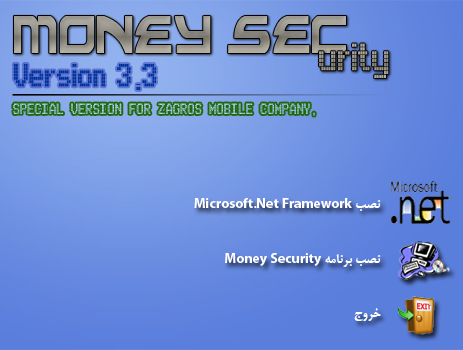
<style>
.page{position:relative;width:463px;height:350px}
.page>*{position:absolute;margin:0}
.t1{font:98.5px "Alexis";color:#9c9890;scale:0.61 1}
.t2{font:59.1px "Arcade";color:#96958d;scale:0.61 1}
.t3{font:49.3px "Arcade";color:#003399;scale:0.61 1}
.t4{font:23px "Arcade";color:#a8cbf9;scale:0.61 1}
.t5{font:14px "BMitraBold";color:#ffffff}
</style>
<div class="page">
<p class="t1" style="left:14px;top:16px;width:332px;height:37px">Money Sec</p>
<p class="t2" style="left:319px;top:43px;width:70px;height:35px">urity</p>
<p class="t3" style="left:13px;top:63px;width:93px;height:24px">Version</p>
<p class="t3" style="left:116px;top:63px;width:41px;height:27px">3.3</p>
<p class="t4" style="left:13px;top:103px;width:302px;height:13px">SPECIAL VERSION FOR ZAGROS MOBILE COMPANY.</p>
<p class="t5" style="left:194px;top:198px;width:187px;height:13px">نصب Microsoft.Net Framework</p>
<p class="t5" style="left:225px;top:253px;width:156px;height:14px">نصب برنامه Money Security</p>
<p class="t5" style="left:354px;top:308px;width:27px;height:13px">خروج</p>
</div>
